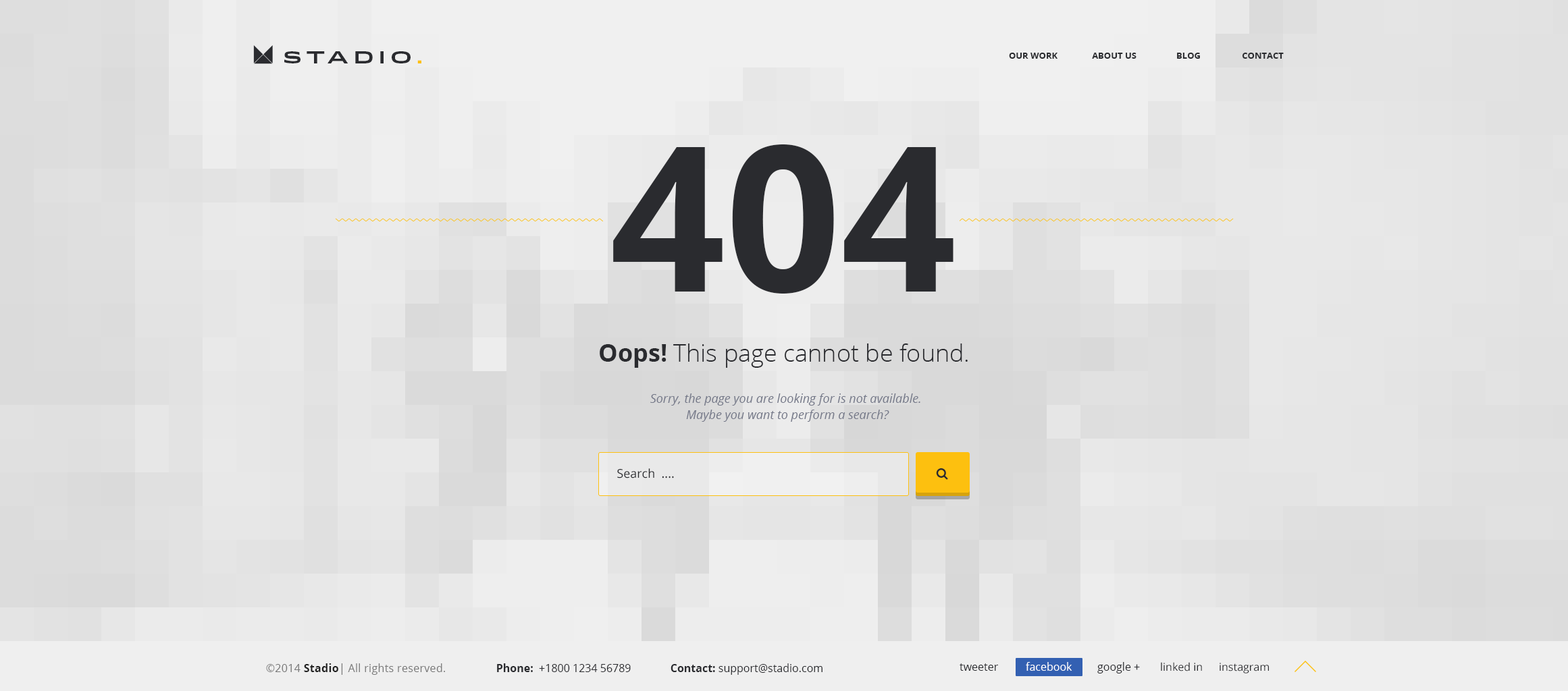
<style>
.page{position:relative;width:1568px;height:691px}
.page>*{position:absolute;margin:0}
.t1{font:16.2px "Idlewild-Bold";letter-spacing:0.3em;color:#2a2b2f;text-transform:uppercase}
.t2{font:16.2px "Idlewild-Bold";letter-spacing:0.3em;color:#fdc00f;text-transform:uppercase}
.t3{font:8.8px "OpenSans-Bold";color:#2a2b2f;text-transform:uppercase}
.t4{font:202.6px "OpenSans-Bold";color:#2a2b2f;text-transform:uppercase}
.t5{font:24.3px "OpenSans-Light";color:#2a2b2f}
.t6{font:24.3px "OpenSans-Bold";color:#2a2b2f}
.t7{font:12.2px/16.2px "OpenSans-Italic";color:#757989}
.t8{font:12.2px "OpenSans";color:#2a2b2f}
.t9{font:10.8px "OpenSans";letter-spacing:0.02em;color:#787878}
.t10{font:10.8px "OpenSans-Bold";letter-spacing:0.02em;color:#222222}
.t11{font:10.8px "OpenSans";color:#2a2b2f}
.t12{font:10.8px "OpenSans-Bold";color:#2a2b2f}
.t13{font:10.8px "OpenSans";color:#ffffff}
</style>
<div class="page">
<p class="t1" style="left:284px;top:51px;width:137px;height:12px">stAdio<span class="t2">.</span></p>
<p class="t3" style="left:1009px;top:53px;width:48px;height:6px">our work</p>
<p class="t3" style="left:1092px;top:53px;width:44px;height:6px">About us</p>
<p class="t3" style="left:1177px;top:53px;width:23px;height:6px">BLOG</p>
<p class="t3" style="left:1242px;top:53px;width:42px;height:6px">Contact</p>
<p class="t4" style="left:613px;top:145px;width:340px;height:149px">404</p>
<p class="t5" style="left:600px;top:344px;width:368px;height:24px"><span class="t6">Oops! </span>This page cannot be found.</p>
<p class="t7" style="left:650px;top:394px;width:270px;height:28px;text-align:center">Sorry, the page you are looking for is not available. <br>Maybe you want to perform a search?</p>
<p class="t8" style="left:617px;top:469px;width:57px;height:10px">Search  ....</p>
<p class="t9" style="left:266px;top:664px;width:179px;height:11px">©2014 <span class="t10">Stadio</span>| All rights reserved.</p>
<p class="t11" style="left:497px;top:664px;width:325px;height:11px"><span class="t12">Phone:</span>  +1800 1234 56789              <span class="t12">Contact:</span> support@stadio.com</p>
<p class="t11" style="left:960px;top:664px;width:38px;height:7px">tweeter</p>
<p class="t13" style="left:1026px;top:662px;width:46px;height:9px">facebook</p>
<p class="t11" style="left:1097px;top:662px;width:43px;height:12px">google +</p>
<p class="t11" style="left:1161px;top:662px;width:41px;height:10px">linked in</p>
<p class="t11" style="left:1220px;top:663px;width:49px;height:11px">instagram</p>
</div>
